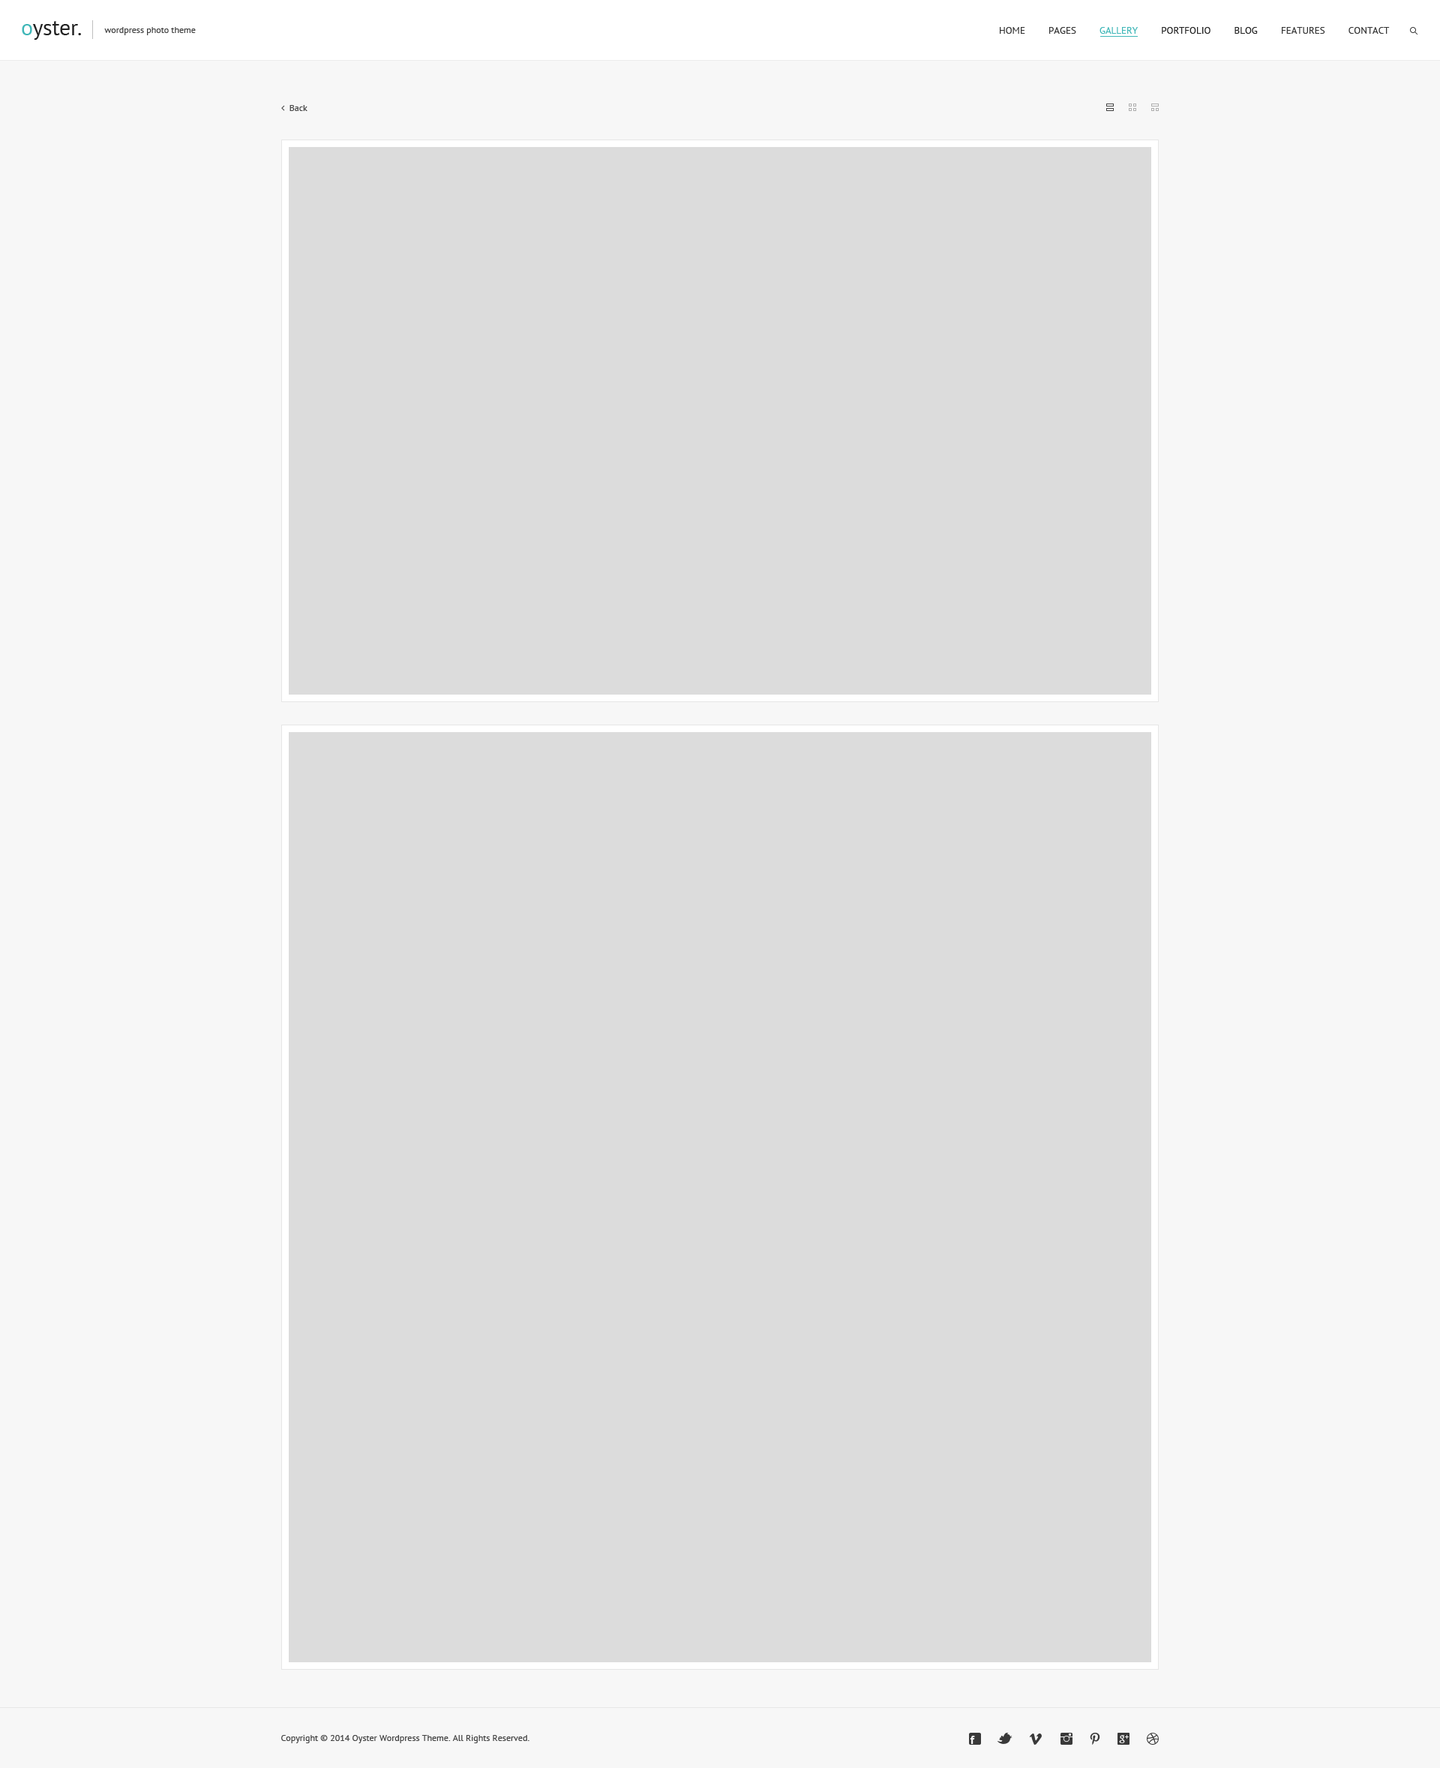
<style>
.page{position:relative;width:1440px;height:1768px;background:#dcdcdc}
.page>*{position:absolute;margin:0}
.t1{font:9px "PTSans-Regular";color:#434343}
.t2{font:9.8px "PTSans-Regular";color:#343434;text-transform:uppercase}
.t3{font:9.8px "PTSans-Regular";color:#40b7b8;text-transform:uppercase}
.t4{font:9.8px "PTSans-Regular";color:#222222;text-transform:uppercase}
</style>
<div class="page">
<p class="t1" style="left:104px;top:27px;width:92px;height:8px">wordpress photo theme</p>
<p class="t2" style="left:1000px;top:27px;width:390px;height:7px">Home         Pages         <span class="t3">Gallery         </span><span class="t4">Portfolio         Blog         </span>Features         Contact</p>
<p class="t1" style="left:281px;top:1735px;width:249px;height:8px">Copyright © 2014 Oyster Wordpress Theme. All Rights Reserved.</p>
</div>
